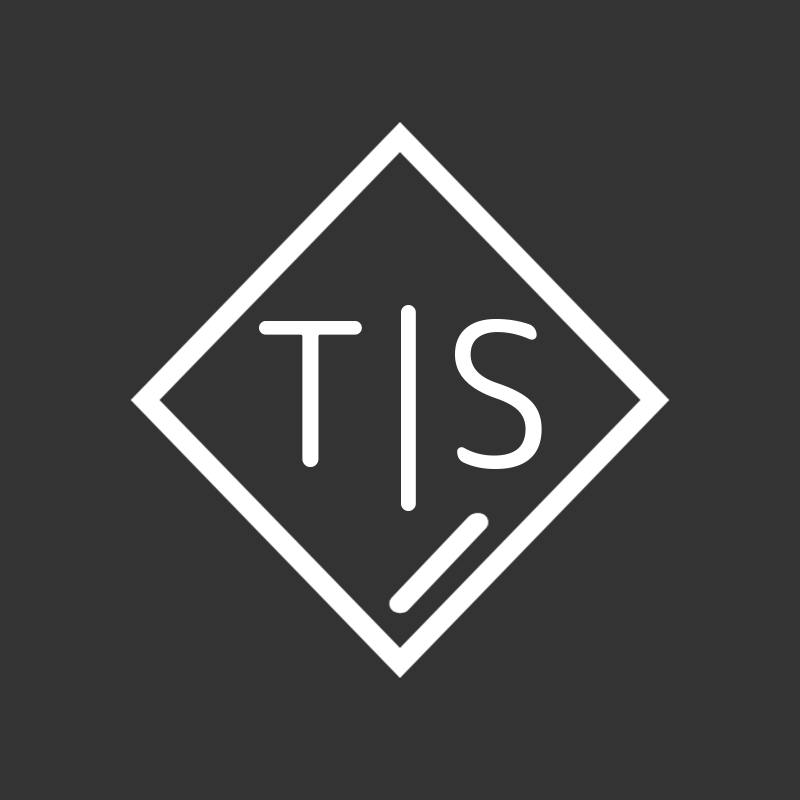
<style>
.page{position:relative;width:800px;height:800px;background:#333333}
.page>*{position:absolute;margin:0}
.t1{font:200px "RoundedMplus1c-Regular";color:#ffffff}
</style>
<div class="page">
<p class="t1" style="left:259px;top:305px;width:283px;height:206px">T|S</p>
</div>
